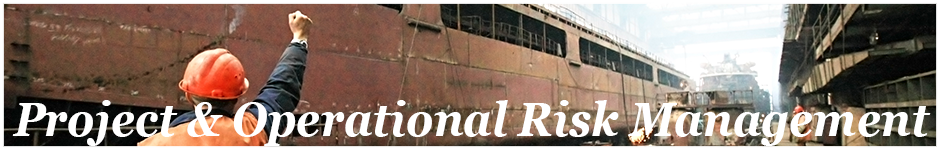
<style>
.page{position:relative;width:940px;height:150px}
.page>*{position:absolute;margin:0}
.t1{font:47px "Georgia-BoldItalic";color:#ffffff;scale:0.92 1}
</style>
<div class="page">
<p class="t1" style="left:12px;top:100px;width:919px;height:46px">Project &amp; Operational Risk Management</p>
</div>
